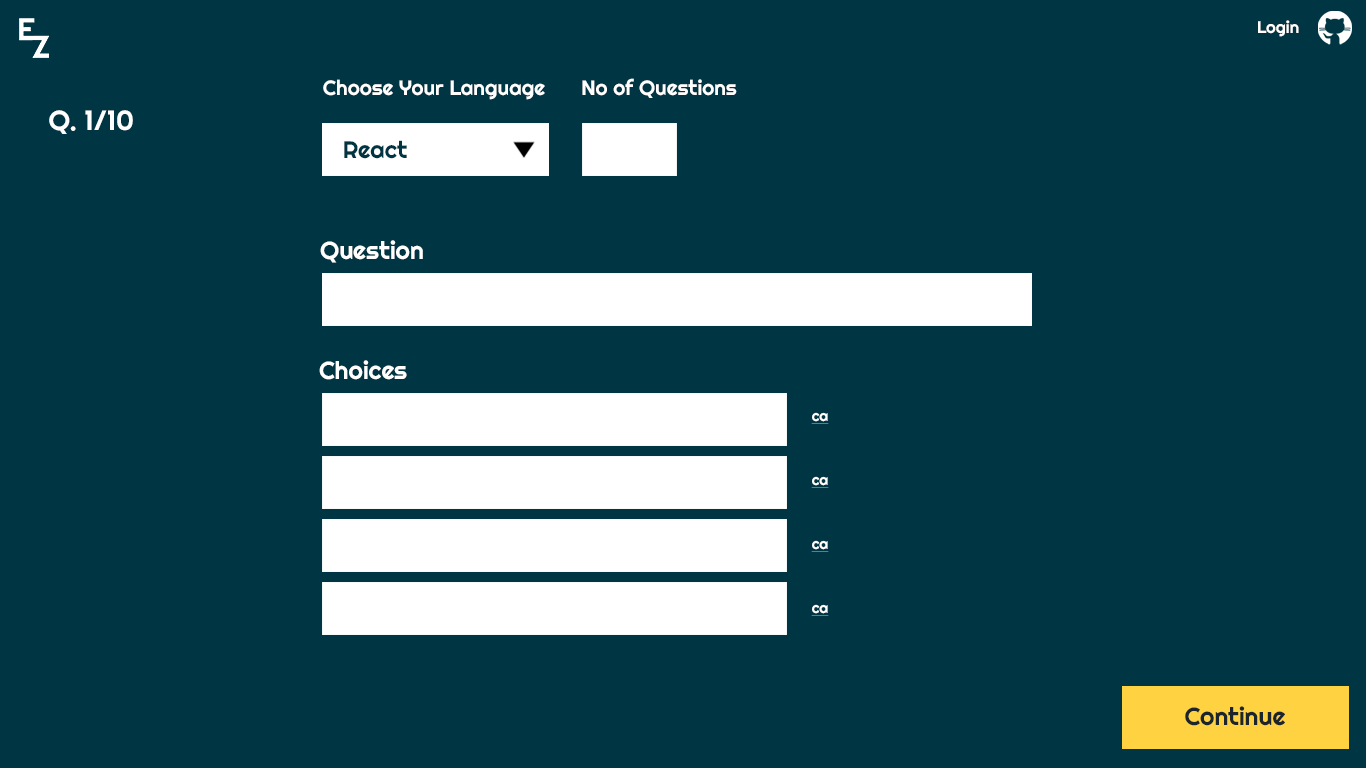
<style>
.page{position:relative;width:1366px;height:768px;background:#003644}
.page>*{position:absolute;margin:0}
.t1{font:16.7px "Righteous-Regular";color:#ffffff}
.t2{font:20.7px "Righteous-Regular";color:#ffffff}
.t3{font:27.7px "Righteous-Regular";color:#ffffff}
.t4{font:23.7px "Righteous-Regular";color:#003644}
.t5{font:24.7px "Righteous-Regular";color:#ffffff}
.t6{font:14.7px "Righteous-Regular";color:#ffffff;text-decoration:underline}
.t7{font:24.7px "Righteous-Regular";color:#1d252c}
</style>
<div class="page">
<p class="t1" style="left:1258px;top:20px;width:41px;height:17px">Login</p>
<p class="t2" style="left:582px;top:78px;width:155px;height:20px">No of Questions</p>
<p class="t2" style="left:323px;top:79px;width:222px;height:21px">Choose Your Language</p>
<p class="t3" style="left:49px;top:110px;width:84px;height:24px">Q. 1/10</p>
<p class="t4" style="left:344px;top:140px;width:63px;height:19px">React</p>
<p class="t5" style="left:320px;top:240px;width:103px;height:23px">Question</p>
<p class="t5" style="left:319px;top:360px;width:88px;height:20px">Choices</p>
<p class="t6" style="left:811px;top:412px;width:18px;height:12px">ca</p>
<p class="t6" style="left:811px;top:476px;width:18px;height:12px">ca</p>
<p class="t6" style="left:811px;top:540px;width:18px;height:12px">ca</p>
<p class="t6" style="left:811px;top:604px;width:18px;height:12px">ca</p>
<p class="t7" style="left:1185px;top:706px;width:100px;height:20px">Continue</p>
</div>
